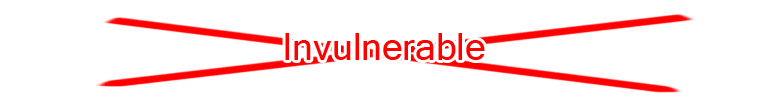
<style>
.page{position:relative;width:772px;height:100px;background:#ffffff}
.page>*{position:absolute;margin:0}
.t1{font:36px "Mangal";color:#ff0000}
</style>
<div class="page">
<p class="t1" style="left:285px;top:33px;width:200px;height:27px">Invulnerable</p>
</div>
